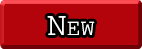
<style>
.page{position:relative;width:142px;height:49px;background:#b2040a}
.page>*{position:absolute;margin:0}
.t1{font:33px "CourierNewPSMT";color:#ffffff;font-variant:small-caps}
</style>
<div class="page">
<p class="t1" style="left:47px;top:16px;width:48px;height:19px">New</p>
</div>
